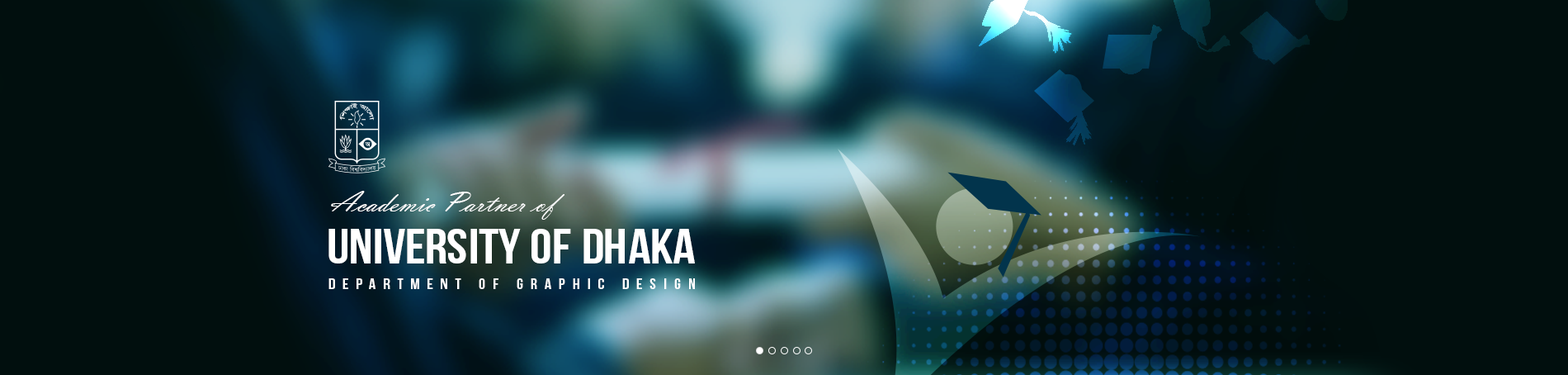
<style>
.page{position:relative;width:1568px;height:375px;background:#010f0e}
.page>*{position:absolute;margin:0}
.t1{font:28.9px "VladimirScript";color:#ffffff;scale:1.14 1}
.t2{font:49px "BebasNeue";color:#ffffff;text-transform:uppercase;scale:1.14 1}
.t3{font:15px "BebasNeue";letter-spacing:0.43em;color:#ffffff;scale:1.14 1}
</style>
<div class="page">
<p class="t1" style="left:331px;top:191px;width:233px;height:29px">Academic Partner of</p>
<p class="t2" style="left:328px;top:229px;width:367px;height:34px">university of dhaka</p>
<p class="t3" style="left:328px;top:278px;width:367px;height:11px">Department of Graphic Design</p>
</div>
